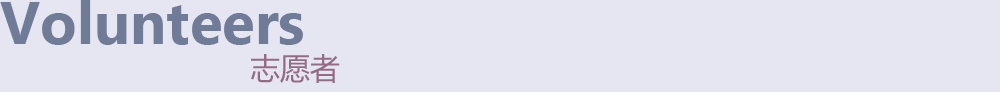
<style>
.page{position:relative;width:1000px;height:92px;background:#e6e6f2}
.page>*{position:absolute;margin:0}
.t1{font:60px "SegoeUI-Bold";color:#707b98}
.t2{font:30px "MicrosoftYaHei";color:#926c82}
</style>
<div class="page">
<p class="t1" style="left:0px;top:0px;width:303px;height:45px">Volunteers</p>
<p class="t2" style="left:251px;top:54px;width:89px;height:29px">志愿者</p>
</div>
